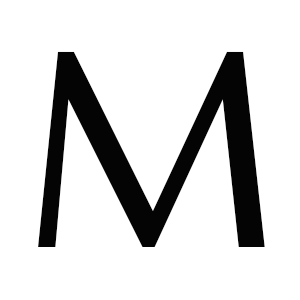
<style>
.page{position:relative;width:300px;height:300px;background:#ffffff}
.page>*{position:absolute;margin:0}
.t1{font:388.1px "SakkalMajalla";letter-spacing:0.06em;color:#040404}
</style>
<div class="page">
<p class="t1" style="left:38px;top:51px;width:227px;height:196px">M</p>
</div>
